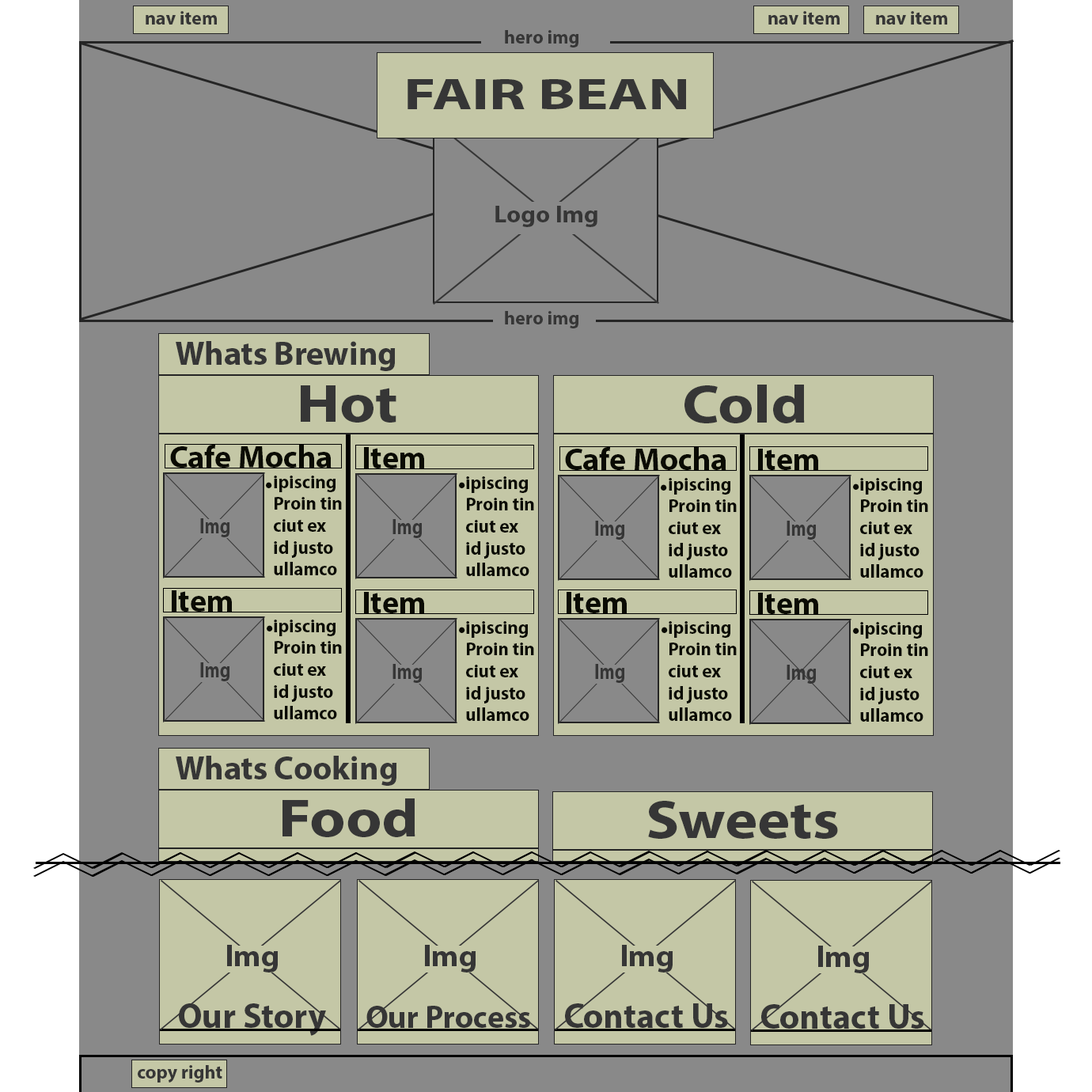
<style>
.page{position:relative;width:1092px;height:1092px;background:#898989}
.page>*{position:absolute;margin:0}
.t1{font:19px "MyriadPro-Bold";color:#363636}
.t2{font:43.6px "MyriadPro-Bold";color:#363636;scale:1.4 1}
.t3{font:23.8px "MyriadPro-Bold";color:#363636;scale:1.06 1}
.t4{font:33.2px "MyriadPro-Bold";color:#363636}
.t5{font:53.8px "MyriadPro-Bold";color:#363636;scale:1.15 1}
.t6{font:31.5px "MyriadPro-Bold";color:#0a0b03}
.t7{font:31.7px "MyriadPro-Bold";color:#0a0b03}
.t8{font:18.2px "MyriadPro-Bold";color:#0a0b03}
.t9{font:21.7px "MyriadPro-Bold";color:#363636;scale:0.82 1}
.t10{font:30.8px "MyriadPro-Bold";color:#363636}
.t11{font:35.3px "MyriadPro-Bold";color:#363636}
.t12{font:32.1px "MyriadPro-Bold";color:#363636}
</style>
<div class="page">
<p class="t1" style="left:146px;top:11px;width:71px;height:14px">nav item</p>
<p class="t1" style="left:768px;top:11px;width:72px;height:14px">nav item</p>
<p class="t1" style="left:876px;top:11px;width:71px;height:14px">nav item</p>
<p class="t1" style="left:505px;top:30px;width:73px;height:17px">hero img</p>
<p class="t2" style="left:408px;top:79px;width:278px;height:30px">FAIR BEAN</p>
<p class="t3" style="left:495px;top:206px;width:102px;height:21px">Logo Img</p>
<p class="t1" style="left:505px;top:311px;width:73px;height:17px">hero img</p>
<p class="t4" style="left:176px;top:341px;width:220px;height:30px">Whats Brewing</p>
<p class="t5" style="left:301px;top:385px;width:95px;height:38px">Hot</p>
<p class="t5" style="left:684px;top:385px;width:121px;height:38px">Cold</p>
<p class="t6" style="left:170px;top:445px;width:162px;height:23px">Cafe Mocha</p>
<p class="t6" style="left:364px;top:447px;width:60px;height:21px">Item</p>
<p class="t6" style="left:565px;top:447px;width:161px;height:23px">Cafe Mocha</p>
<p class="t6" style="left:758px;top:449px;width:60px;height:21px">Item</p>
<p class="t7" style="left:266px;top:482px;width:6px;height:6px">.</p>
<p class="t8" style="left:274px;top:476px;width:68px;height:99px">ipiscing<br>Proin tin<br>ciut ex <br>id justo<br>ullamco</p>
<p class="t7" style="left:459px;top:482px;width:6px;height:6px">.</p>
<p class="t8" style="left:466px;top:476px;width:68px;height:100px">ipiscing<br>Proin tin<br>ciut ex <br>id justo<br>ullamco</p>
<p class="t7" style="left:661px;top:484px;width:6px;height:7px">.</p>
<p class="t8" style="left:669px;top:478px;width:68px;height:100px">ipiscing<br>Proin tin<br>ciut ex <br>id justo<br>ullamco</p>
<p class="t7" style="left:853px;top:483px;width:6px;height:7px">.</p>
<p class="t8" style="left:860px;top:478px;width:68px;height:100px">ipiscing<br>Proin tin<br>ciut ex <br>id justo<br>ullamco</p>
<p class="t9" style="left:200px;top:518px;width:29px;height:19px">Img</p>
<p class="t9" style="left:392px;top:519px;width:30px;height:19px">Img</p>
<p class="t9" style="left:595px;top:521px;width:29px;height:19px">Img</p>
<p class="t9" style="left:787px;top:521px;width:29px;height:19px">Img</p>
<p class="t6" style="left:172px;top:590px;width:60px;height:22px">Item</p>
<p class="t6" style="left:364px;top:592px;width:60px;height:21px">Item</p>
<p class="t6" style="left:567px;top:592px;width:60px;height:21px">Item</p>
<p class="t6" style="left:758px;top:593px;width:60px;height:21px">Item</p>
<p class="t7" style="left:267px;top:625px;width:6px;height:6px">.</p>
<p class="t8" style="left:274px;top:620px;width:68px;height:99px">ipiscing<br>Proin tin<br>ciut ex <br>id justo<br>ullamco</p>
<p class="t7" style="left:459px;top:627px;width:6px;height:6px">.</p>
<p class="t8" style="left:466px;top:621px;width:68px;height:100px">ipiscing<br>Proin tin<br>ciut ex <br>id justo<br>ullamco</p>
<p class="t7" style="left:662px;top:627px;width:6px;height:6px">.</p>
<p class="t8" style="left:669px;top:621px;width:68px;height:100px">ipiscing<br>Proin tin<br>ciut ex <br>id justo<br>ullamco</p>
<p class="t7" style="left:853px;top:627px;width:6px;height:7px">.</p>
<p class="t8" style="left:860px;top:622px;width:68px;height:100px">ipiscing<br>Proin tin<br>ciut ex <br>id justo<br>ullamco</p>
<p class="t9" style="left:200px;top:662px;width:29px;height:19px">Img</p>
<p class="t9" style="left:392px;top:664px;width:30px;height:19px">Img</p>
<p class="t9" style="left:595px;top:664px;width:29px;height:19px">Img</p>
<p class="t9" style="left:787px;top:665px;width:29px;height:19px">Img</p>
<p class="t4" style="left:176px;top:756px;width:221px;height:30px">Whats Cooking</p>
<p class="t5" style="left:282px;top:798px;width:133px;height:39px">Food</p>
<p class="t5" style="left:648px;top:801px;width:190px;height:38px">Sweets</p>
<p class="t10" style="left:227px;top:945px;width:52px;height:28px">Img</p>
<p class="t10" style="left:425px;top:945px;width:51px;height:28px">Img</p>
<p class="t10" style="left:622px;top:945px;width:51px;height:28px">Img</p>
<p class="t10" style="left:818px;top:946px;width:52px;height:27px">Img</p>
<p class="t11" style="left:179px;top:1003px;width:147px;height:33px">Our Story</p>
<p class="t12" style="left:366px;top:1006px;width:164px;height:22px">Our Process</p>
<p class="t11" style="left:565px;top:1003px;width:163px;height:25px">Contact Us</p>
<p class="t11" style="left:761px;top:1004px;width:163px;height:25px">Contact Us</p>
<p class="t1" style="left:138px;top:1065px;width:84px;height:17px">copy right</p>
</div>
